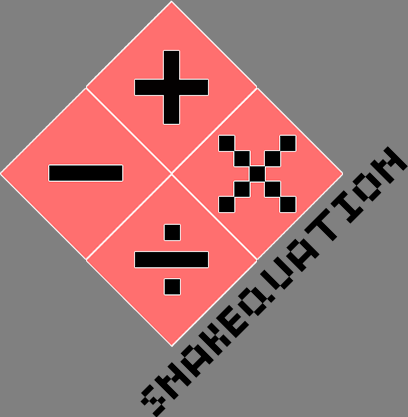
<style>
.page{position:relative;width:408px;height:417px;background:#808080}
.page>*{position:absolute;margin:0}
.t1{font:28px "OurQuinny";color:#000000;text-transform:uppercase;scale:1.11 1}
</style>
<div class="page">
<p class="t1" style="left:140px;top:146px;width:268px;height:272px;rotate:-45deg">SNAKEQUATION</p>
</div>
